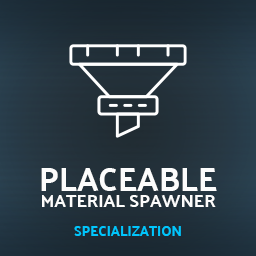
<style>
.page{position:relative;width:256px;height:256px}
.page>*{position:absolute;margin:0}
.t1{font:33px "PalanquinDark-Regular";color:#fcfcfc;text-transform:uppercase}
.t2{font:18px "PalanquinDark-Regular";color:#fcfcfc;text-transform:uppercase}
.t3{font:14px "PalanquinDark-Regular";color:#00c6fd;text-transform:uppercase}
</style>
<div class="page">
<p class="t1" style="left:41px;top:168px;width:176px;height:23px">Placeable</p>
<p class="t2" style="left:42px;top:195px;width:174px;height:12px">Material Spawner</p>
<p class="t3" style="left:74px;top:226px;width:107px;height:10px">Specialization</p>
</div>
